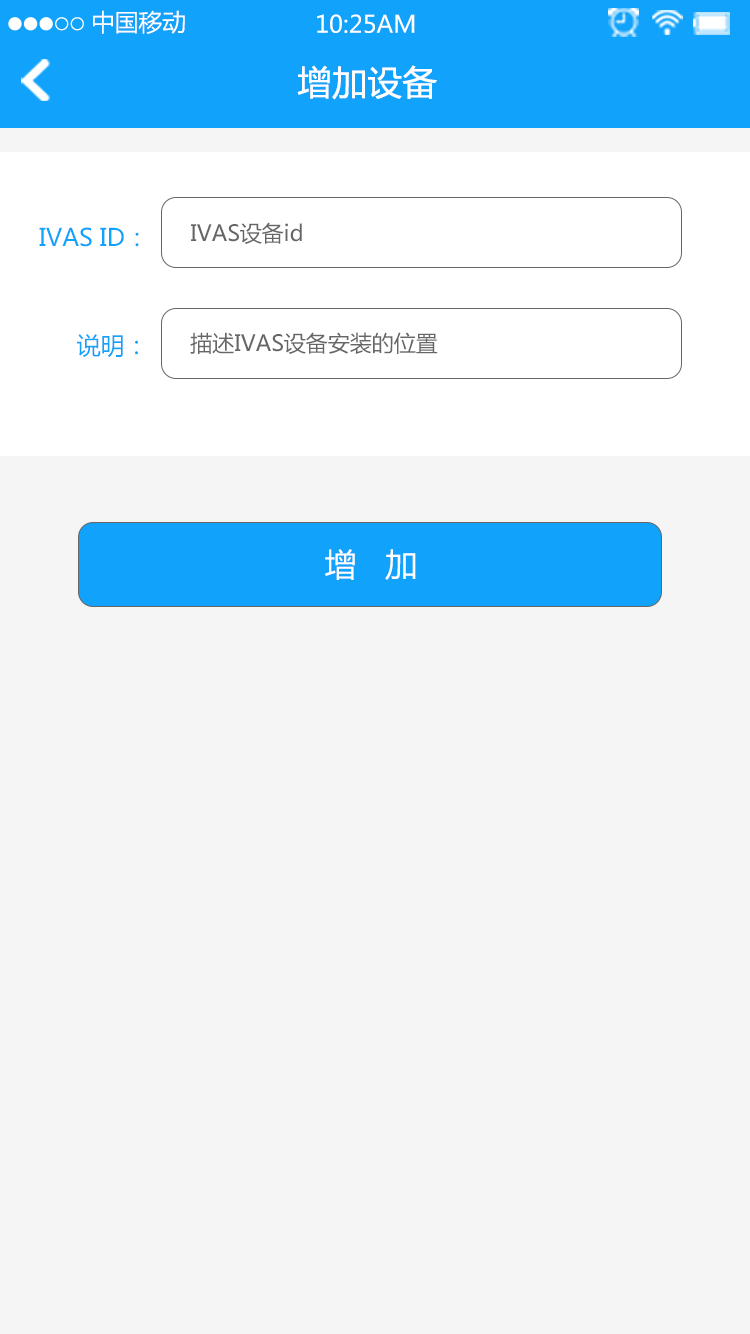
<style>
.page{position:relative;width:750px;height:1334px;background:#f5f5f5}
.page>*{position:absolute;margin:0}
.t1{font:23.7px "MicrosoftYaHei";color:#ffffff}
.t2{font:34px "MicrosoftYaHei";color:#ffffff;font-weight:bold}
.t3{font:22px "MicrosoftYaHei";color:#666666}
.t4{font:24px "MicrosoftYaHei";color:#11a2fb}
.t5{font:32px "MicrosoftYaHei";color:#ffffff}
</style>
<div class="page">
<p class="t1" style="left:93px;top:10px;width:92px;height:24px">中国移动</p>
<p class="t1" style="left:317px;top:14px;width:98px;height:19px">10:25AM</p>
<p class="t2" style="left:297px;top:65px;width:140px;height:35px">增加设备</p>
<p class="t3" style="left:191px;top:222px;width:111px;height:22px">IVAS设备id</p>
<p class="t4" style="left:39px;top:227px;width:100px;height:20px">IVAS ID：</p>
<p class="t4" style="left:77px;top:334px;width:61px;height:24px">说明：</p>
<p class="t3" style="left:190px;top:332px;width:248px;height:22px">描述IVAS设备安装的位置</p>
<p class="t5" style="left:325px;top:549px;width:91px;height:31px">增   加</p>
</div>
